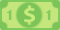
<style>
.page{position:relative;width:60px;height:30px;background:#c4e67c}
.page>*{position:absolute;margin:0}
.t1{font:13px "Impact";letter-spacing:0.08em;color:#83ca5f}
</style>
<div class="page">
<p class="t1" style="left:7px;top:10px;width:5px;height:10px">1</p>
<p class="t1" style="left:46px;top:10px;width:5px;height:10px">1</p>
</div>
